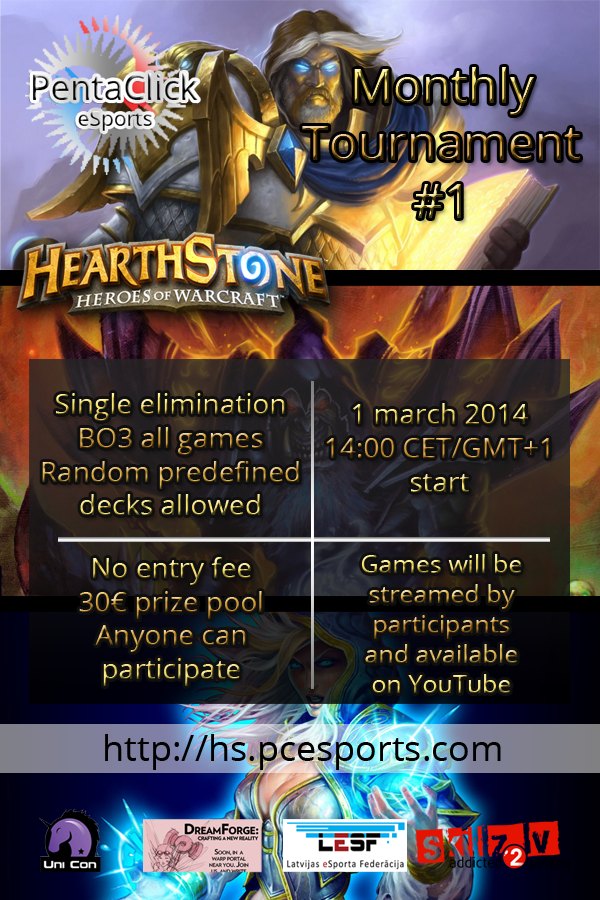
<style>
.page{position:relative;width:600px;height:900px}
.page>*{position:absolute;margin:0}
.t1{font:28px "OpenSans"}
.t2{font:25px "OpenSans"}
.t3{font:36px "OpenSans";color:#000000}
</style>
<div class="page">
<p class="t1" style="left:42px;top:393px;width:257px;height:122px;text-align:center">Single elimination<br>BO3 all games<br>Random predefined<br>decks allowed</p>
<p class="t1" style="left:326px;top:403px;width:223px;height:89px;text-align:center">1 march 2014<br>14:00 CET/GMT+1<br>start</p>
<p class="t1" style="left:79px;top:557px;width:183px;height:129px;text-align:center">No entry fee<br>30€ prize pool<br>Anyone can<br>participate</p>
<p class="t2" style="left:361px;top:554px;width:161px;height:139px;text-align:center">Games will be<br>streamed by<br>participants<br>and available<br>on YouTube</p>
<p class="t3" style="left:105px;top:734px;width:396px;height:36px">http://hs.pcesports.com</p>
</div>
